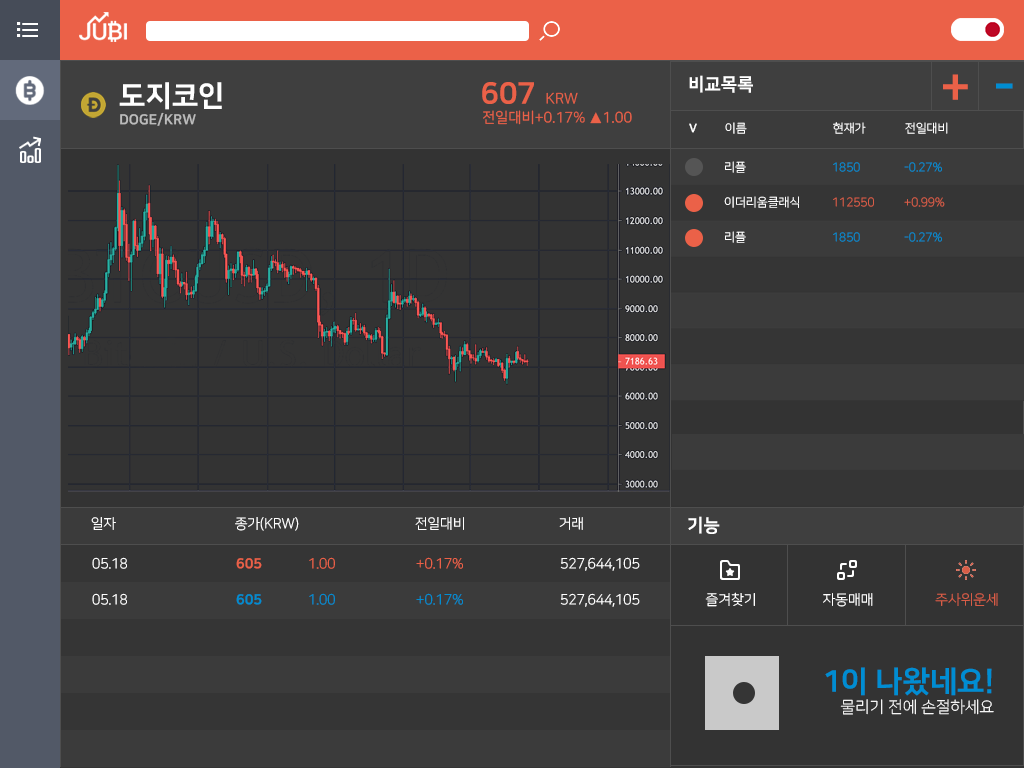
<style>
.page{position:relative;width:1024px;height:768px;background:#333333}
.page>*{position:absolute;margin:0}
.t1{font:18px "NanumSquareEB";color:#ffffff}
.t2{font:48px "NanumSquareEB";color:#eb6148}
.t3{font:29px "NanumSquareEB";color:#ffffff}
.t4{font:29.8px "NanumSquareEB";color:#eb6148}
.t5{font:48px "NanumSquareEB";color:#008dd2}
.t6{font:14.5px "NanumSquareR";color:#eb6148}
.t7{font:14px "NanumSquareEB";color:#bbbbbb}
.t8{font:12px "NanumSquareL";color:#ffffff}
.t9{font:12px "NanumSquareEB";color:#ffffff}
.t10{font:12px "NanumSquareL";color:#008dd2}
.t11{font:12px "NanumSquareL";color:#d85d47}
.t12{font:14px "NanumSquareL";color:#ffffff}
.t13{font:14px "NanumSquareL";color:#eb6148}
.t14{font:14px "NanumSquareEB";color:#eb6148}
.t15{font:14px "NanumSquareL";color:#008dd2}
.t16{font:14px "NanumSquareEB";color:#008dd2}
.t17{font:14px "NanumSquareL";color:#d85d47}
.t18{font:30px "NanumSquareEB";color:#008dd2}
.t19{font:16px "NanumSquareL";color:#ffffff}
</style>
<div class="page">
<p class="t1" style="left:689px;top:75px;width:64px;height:18px">비교목록</p>
<p class="t2" style="left:943px;top:74px;width:25px;height:26px">+</p>
<p class="t3" style="left:119px;top:82px;width:103px;height:28px">도지코인</p>
<p class="t4" style="left:482px;top:82px;width:52px;height:22px">607</p>
<p class="t5" style="left:996px;top:83px;width:17px;height:6px">-</p>
<p class="t6" style="left:546px;top:92px;width:32px;height:12px">KRW</p>
<p class="t7" style="left:120px;top:112px;width:76px;height:14px">DOGE/KRW</p>
<p class="t6" style="left:483px;top:110px;width:149px;height:15px">전일대비+0.17% ▲1.00</p>
<p class="t8" style="left:689px;top:122px;width:259px;height:12px"><span class="t9">V</span> 이름   현재가  전일대비</p>
<p class="t10" style="left:725px;top:161px;width:217px;height:12px"><span class="t8"> 리플   </span>1850  -0.27%</p>
<p class="t11" style="left:724px;top:196px;width:221px;height:12px"><span class="t8"> 이더리움클래식 </span>112550 +0.99%</p>
<p class="t10" style="left:725px;top:231px;width:217px;height:12px"><span class="t8"> 리플   </span>1850  -0.27%</p>
<p class="t12" style="left:91px;top:517px;width:492px;height:14px">일자    종가(KRW)    전일대비   거래</p>
<p class="t1" style="left:688px;top:516px;width:32px;height:18px">기능</p>
<p class="t13" style="left:92px;top:557px;width:548px;height:14px"><span class="t12">05.18    </span><span class="t14">605  </span>1.00   +0.17%<span class="t12">   527,644,105</span></p>
<p class="t15" style="left:92px;top:593px;width:548px;height:14px"><span class="t12">05.18    </span><span class="t16">605</span>  1.00   +0.17%<span class="t12">   527,644,105</span></p>
<p class="t12" style="left:705px;top:592px;width:50px;height:15px">즐겨찾기</p>
<p class="t12" style="left:823px;top:593px;width:50px;height:14px">자동매매</p>
<p class="t17" style="left:935px;top:593px;width:63px;height:13px">주사위운세</p>
<p class="t18" style="left:825px;top:667px;width:167px;height:29px">1이 나왔네요!</p>
<p class="t19" style="left:840px;top:699px;width:154px;height:16px">물리기 전에 손절하세요</p>
</div>
